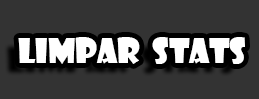
<style>
.page{position:relative;width:259px;height:99px;background:#333333}
.page>*{position:absolute;margin:0}
.t1{font:32.5px "ShowcardGothic-Reg";color:#ffffff}
</style>
<div class="page">
<p class="t1" style="left:18px;top:37px;width:227px;height:27px">Limpar  stats</p>
</div>
